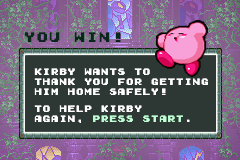
<style>
.page{position:relative;width:240px;height:160px;background:#2d3834}
.page>*{position:absolute;margin:0}
.t1{font:12.5px "GamegirlClassic";color:#0a271c}
.t2{font:8.3px "GamegirlClassic";color:#ffffff}
.t3{font:6px "GamegirlClassic";color:#ffffff}
.t4{font:8.3px "GamegirlClassic";color:#c0ffd6}
</style>
<div class="page">
<p class="t1" style="left:24px;top:32px;width:97px;height:10px">YOU WIN!</p>
<p class="t2" style="left:34px;top:68px;width:174px;height:55px">KIRBY WANTS TO<br>THANK YOU FOR GETTING<br>HIM HOME SAFELY!<br><span class="t3"> <br></span>TO HELP KIRBY<br>AGAIN, <span class="t4">PRESS START</span>.</p>
</div>
